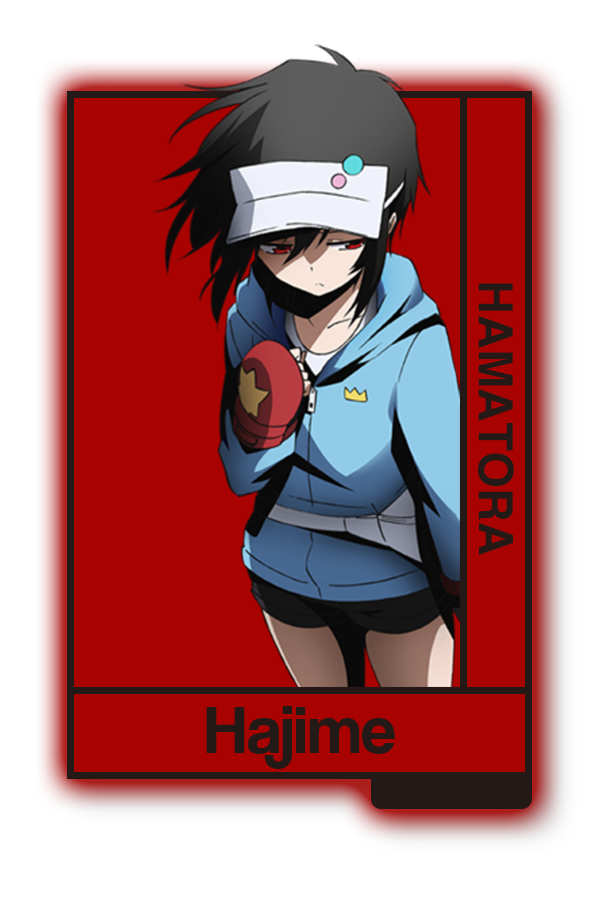
<style>
.page{position:relative;width:600px;height:900px;background:#a80301}
.page>*{position:absolute;margin:0}
.t1{font:47.4px "Helvetica-Bold";color:#231917}
.t2{font:70.1px "CoolveticaRg-Regular";color:#231917}
</style>
<div class="page">
<p class="t1" style="left:478px;top:283px;width:36px;height:272px;rotate:90deg">HAMATORA</p>
<p class="t2" style="left:206px;top:706px;width:189px;height:63px">Hajime</p>
</div>
